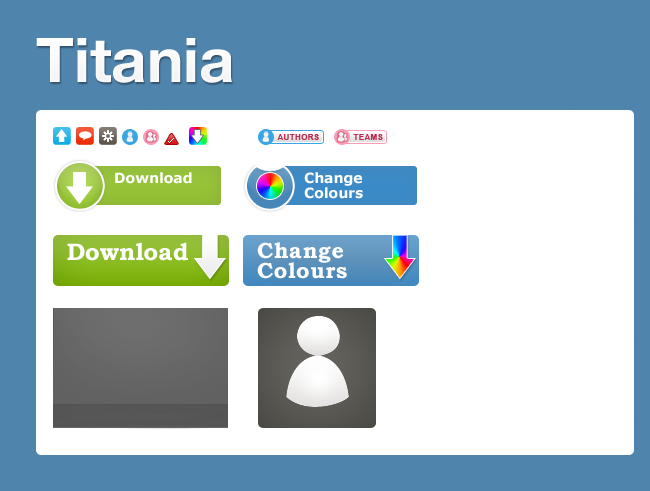
<style>
.page{position:relative;width:650px;height:491px;background:#ffffff}
.page>*{position:absolute;margin:0}
.t1{font:61.6px "HelveticaNeueLTStd-Bd";color:#ffffff}
.t2{font:8px "Arial-BoldMT";letter-spacing:0.05em;color:#bc2a4d;text-transform:uppercase}
.t3{font:14px "Verdana-Bold";color:#ffffff}
.t4{font:14px/15px "Verdana-Bold";color:#ffffff}
.t5{font:24px "BookmanOldStyle-Bold";color:#ffffff}
.t6{font:22px/20px "BookmanOldStyle-Bold";letter-spacing:0.025em;color:#ffffff}
</style>
<div class="page">
<p class="t1" style="left:36px;top:38px;width:196px;height:45px">Titania</p>
<p class="t2" style="left:277px;top:134px;width:42px;height:6px">AUTHORS</p>
<p class="t2" style="left:353px;top:134px;width:30px;height:6px">TEAMS</p>
<p class="t3" style="left:115px;top:172px;width:77px;height:12px">Download</p>
<p class="t4" style="left:304px;top:172px;width:59px;height:27px">Change<br>Colours</p>
<p class="t5" style="left:67px;top:242px;width:121px;height:19px">Download</p>
<p class="t6" style="left:257px;top:242px;width:90px;height:37px">Change<br>Colours</p>
</div>
